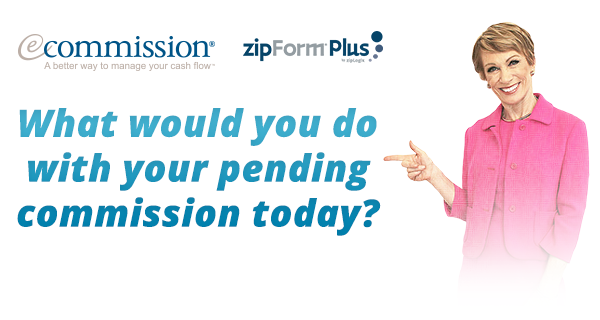
<style>
.page{position:relative;width:600px;height:320px;background:#ffffff}
.page>*{position:absolute;margin:0}
.t1{font:37.4px "OpenSans-ExtraboldItalic";letter-spacing:-0.01em;font-weight:bold}
</style>
<div class="page">
<p class="t1" style="left:17px;top:108px;width:364px;height:128px;text-align:center">What would you do<br>with your pending<br>commission today?</p>
</div>
